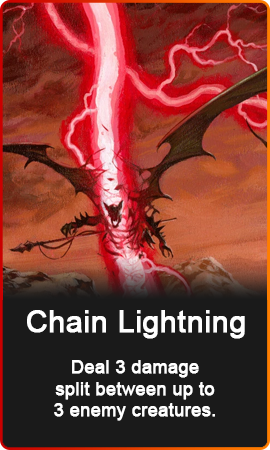
<style>
.page{position:relative;width:270px;height:450px;background:#1a1a1a}
.page>*{position:absolute;margin:0}
.t1{font:30px "ArialMT";color:#ffffff;font-weight:bold}
.t2{font:18px "ArialMT";color:#ffffff;font-weight:bold}
</style>
<div class="page">
<p class="t1" style="left:27px;top:310px;width:218px;height:29px">Chain Lightning</p>
<p class="t2" style="left:54px;top:360px;width:161px;height:61px;text-align:center">Deal 3 damage<br>split between up to<br>3 enemy creatures.</p>
</div>
